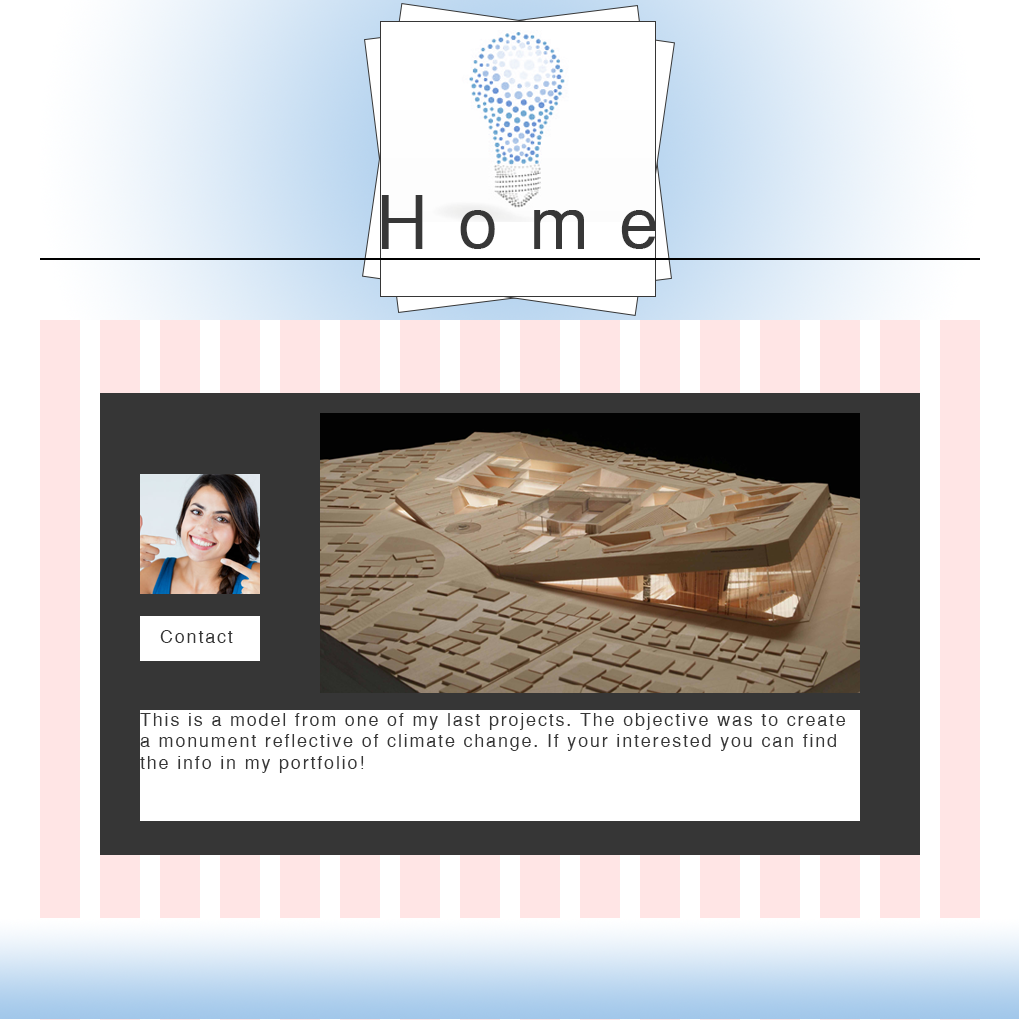
<style>
.page{position:relative;width:1020px;height:1020px;background:#ffffff}
.page>*{position:absolute;margin:0}
.t1{font:72px "SansSerif";letter-spacing:0.42em;color:#373737}
.t2{font:18px "SansSerif";letter-spacing:0.1em;color:#373737}
</style>
<div class="page">
<p class="t1" style="left:381px;top:195px;width:275px;height:54px">Home</p>
<p class="t2" style="left:160px;top:630px;width:73px;height:13px">Contact</p>
<p class="t2" style="left:140px;top:713px;width:706px;height:60px">This is a model from one of my last projects. The objective was to create a monument reflective of climate change. If your interested you can find the info in my portfolio!</p>
</div>
